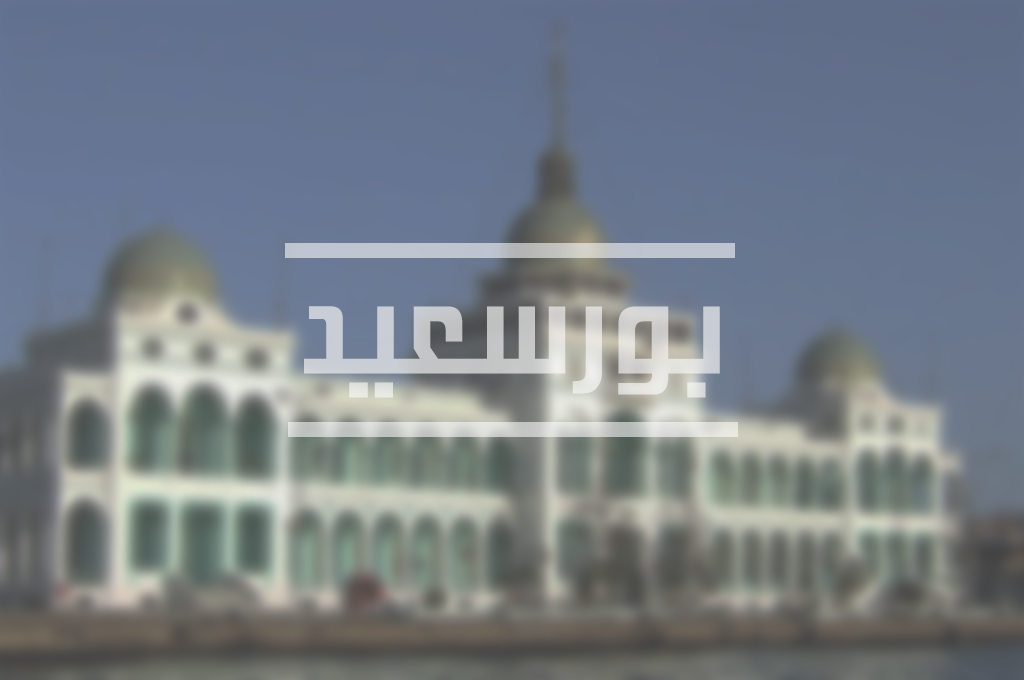
<style>
.page{position:relative;width:1024px;height:680px}
.page>*{position:absolute;margin:0}
.t1{font:163.1px "SC_SHARJAH";color:#cacdd5}
</style>
<div class="page">
<p class="t1" style="left:304px;top:306px;width:416px;height:92px">بورسعيد</p>
</div>
